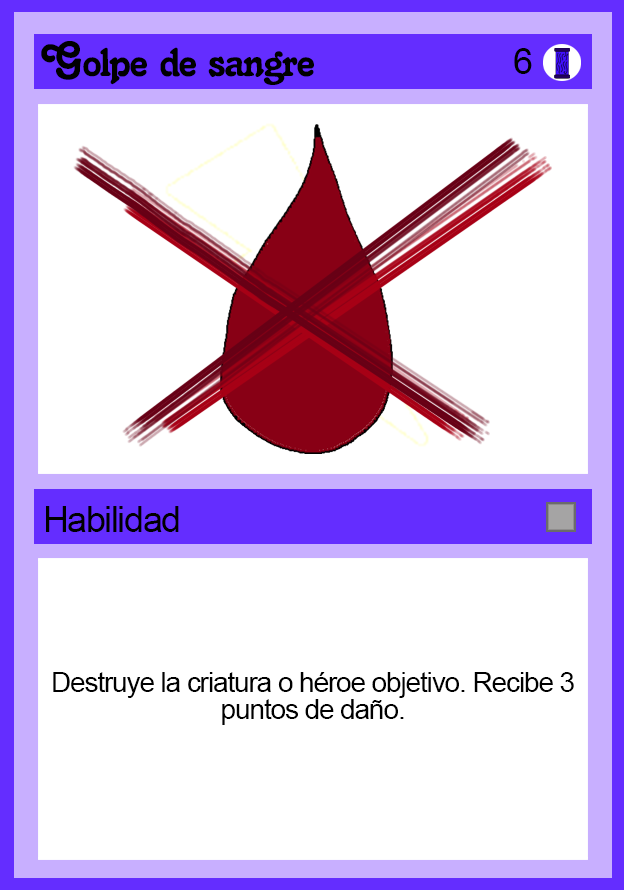
<style>
.page{position:relative;width:624px;height:890px;background:#ffffff}
.page>*{position:absolute;margin:0}
.t1{font:48px "Salina";letter-spacing:-0.04em;color:#000000}
.t2{font:36px "ArialMT";letter-spacing:-0.04em;color:#000000}
.t3{font:28px/27px "ArialMT";letter-spacing:-0.04em;color:#000000}
</style>
<div class="page">
<p class="t1" style="left:41px;top:41px;width:273px;height:44px">Golpe de sangre</p>
<p class="t2" style="left:514px;top:48px;width:18px;height:26px">6</p>
<p class="t2" style="left:46px;top:506px;width:133px;height:26px">Habilidad</p>
<p class="t3" style="left:53px;top:672px;width:521px;height:53px;text-align:center">Destruye la criatura o héroe objetivo. Recibe 3 puntos de daño.</p>
</div>
